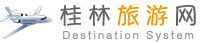
<style>
.page{position:relative;width:209px;height:43px;background:#ffffff}
.page>*{position:absolute;margin:0}
.t1{font:24px "YuppySC-Regular";letter-spacing:0.2em;color:#626262}
.t2{font:24px "YuppySC-Regular";letter-spacing:0.2em;color:#f39800}
.t3{font:11px "YuppySC-Regular";letter-spacing:0.2em;color:#959595}
</style>
<div class="page">
<p class="t1" style="left:60px;top:4px;width:136px;height:22px">桂林<span class="t2">旅游</span>网</p>
<p class="t3" style="left:62px;top:30px;width:132px;height:12px">Destination System</p>
</div>
